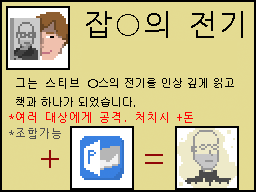
<style>
.page{position:relative;width:256px;height:192px;background:#e4db92}
.page>*{position:absolute;margin:0}
.t1{font:30px "NanumGothicCoding";color:#000000}
.t2{font:11px "Gulim";color:#000000}
.t3{font:11px "NanumGothicCoding";color:#000000}
.t4{font:11px "NanumGothicCoding";color:#ff0000}
.t5{font:11px "NanumGothicCoding";color:#4f4f4f}
.t6{font:36px "NanumGothicCoding";color:#900707}
</style>
<div class="page">
<p class="t1" style="left:86px;top:11px;width:157px;height:27px">잡○의 전기</p>
<p class="t2" style="left:16px;top:78px;width:218px;height:29px"><span class="t3">그는 스티브 </span>○스의 전기를 인상 깊게 읽고<br>책과 하나가 되었습니다.</p>
<p class="t4" style="left:9px;top:112px;width:184px;height:11px">*여러 대상에게 공격. 처치시 +돈</p>
<p class="t5" style="left:9px;top:128px;width:52px;height:11px">*조합가능</p>
<p class="t6" style="left:41px;top:150px;width:18px;height:18px">+</p>
<p class="t6" style="left:145px;top:154px;width:18px;height:10px">=</p>
</div>
